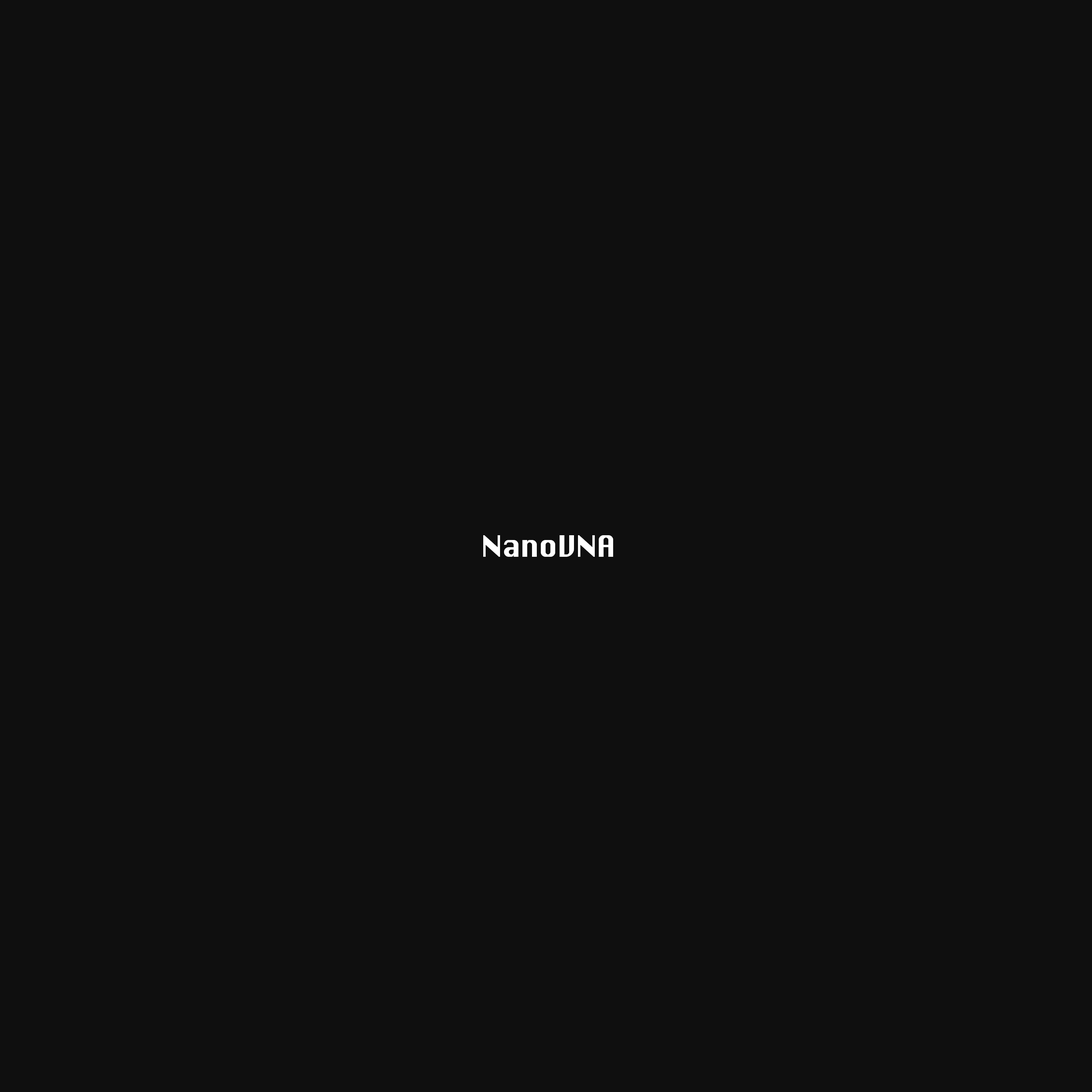
<style>
.page{position:relative;width:1092px;height:1092px;background:#0f0f0f}
.page>*{position:absolute;margin:0}
.t1{font:28.8px "Krungthep";color:#ffffff}
</style>
<div class="page">
<p class="t1" style="left:483px;top:535px;width:130px;height:22px">NanoVNA</p>
</div>
